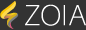
<style>
.page{position:relative;width:86px;height:30px;background:#333333}
.page>*{position:absolute;margin:0}
.t1{font:29.1px "Aileron-Thin";color:#ffffff}
</style>
<div class="page">
<p class="t1" style="left:25px;top:4px;width:61px;height:22px">ZOIA</p>
</div>
